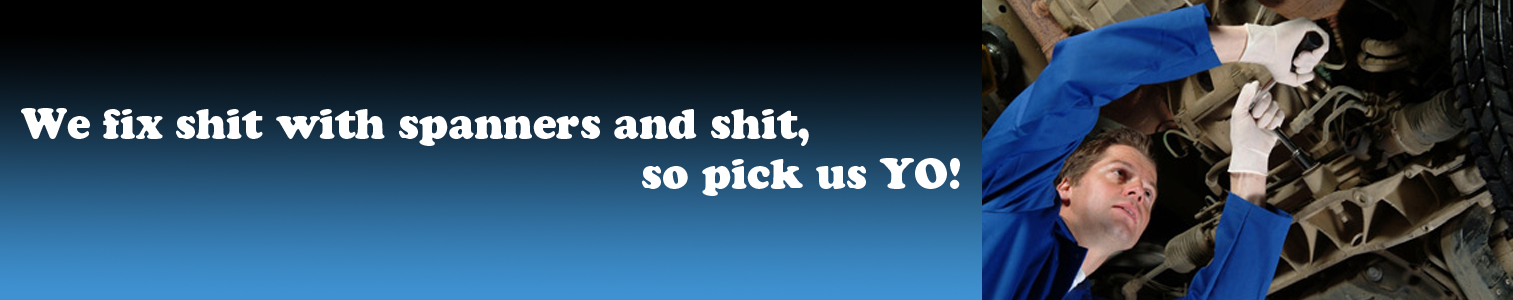
<style>
.page{position:relative;width:1513px;height:300px}
.page>*{position:absolute;margin:0}
.t1{font:41.9px "CooperBlackStd";color:#ffffff}
</style>
<div class="page">
<p class="t1" style="left:21px;top:108px;width:939px;height:88px">We fix shit with spanners and shit, <br>                                               so pick us YO!</p>
</div>
